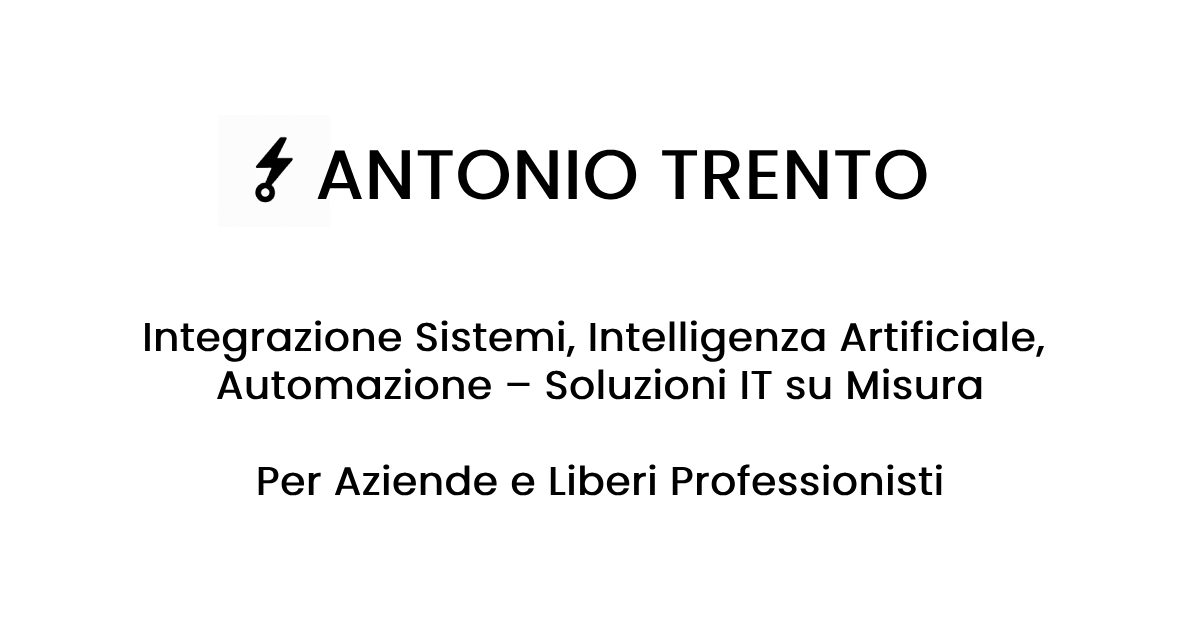
<style>
.page{position:relative;width:1200px;height:630px;background:#ffffff}
.page>*{position:absolute;margin:0}
.t1{font:70px "Poppins-Regular";color:#000000;font-weight:bold}
.t2{font:40px "Poppins-Regular";color:#000000;font-weight:bold}
</style>
<div class="page">
<p class="t1" style="left:317px;top:149px;width:610px;height:51px">ANTONIO TRENTO</p>
<p class="t2" style="left:145px;top:320px;width:900px;height:176px;text-align:center">Integrazione Sistemi, Intelligenza Artificiale, <br>Automazione – Soluzioni IT su Misura<br><br>Per Aziende e Liberi Professionisti</p>
</div>
